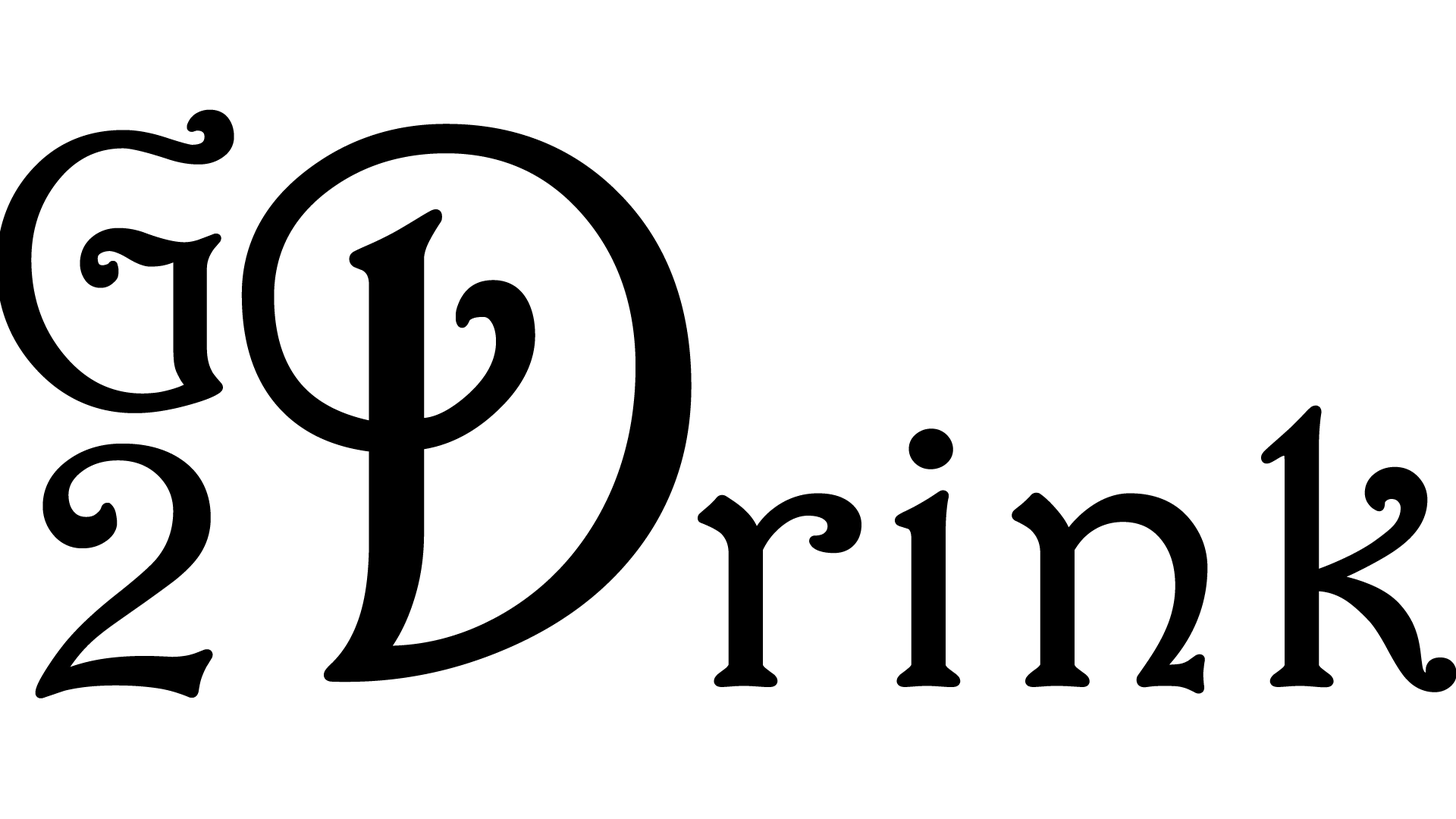
<style>
.page{position:relative;width:1456px;height:819px;background:#ffffff}
.page>*{position:absolute;margin:0}
.t1{font:772.5px "Harrington";color:#000000;font-weight:bold;scale:0.92 1}
.t2{font:385.9px "Harrington";color:#000000;font-weight:bold;scale:1.11 1}
</style>
<div class="page">
<p class="t1" style="left:241px;top:124px;width:451px;height:558px">D</p>
<p class="t2" style="left:698px;top:405px;width:759px;height:289px">rink</p>
<p class="t2" style="left:35px;top:444px;width:178px;height:254px">2</p>
</div>
